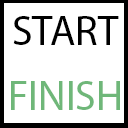
<style>
.page{position:relative;width:128px;height:128px;background:#ffffff}
.page>*{position:absolute;margin:0}
.t1{font:41.7px "MyriadPro-Regular";color:#000000}
.t2{font:41.7px "MyriadPro-Regular";color:#6fb779}
</style>
<div class="page">
<p class="t1" style="left:13px;top:16px;width:106px;height:29px">START</p>
<p class="t2" style="left:11px;top:81px;width:109px;height:29px">FINISH</p>
</div>
